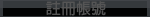
<style>
.page{position:relative;width:150px;height:17px;background:#35393c}
.page>*{position:absolute;margin:0}
.t1{font:15px "AdobeFanHeitiStd-Bold";color:#555555}
</style>
<div class="page">
<p class="t1" style="left:46px;top:1px;width:60px;height:15px">註冊帳號</p>
</div>
